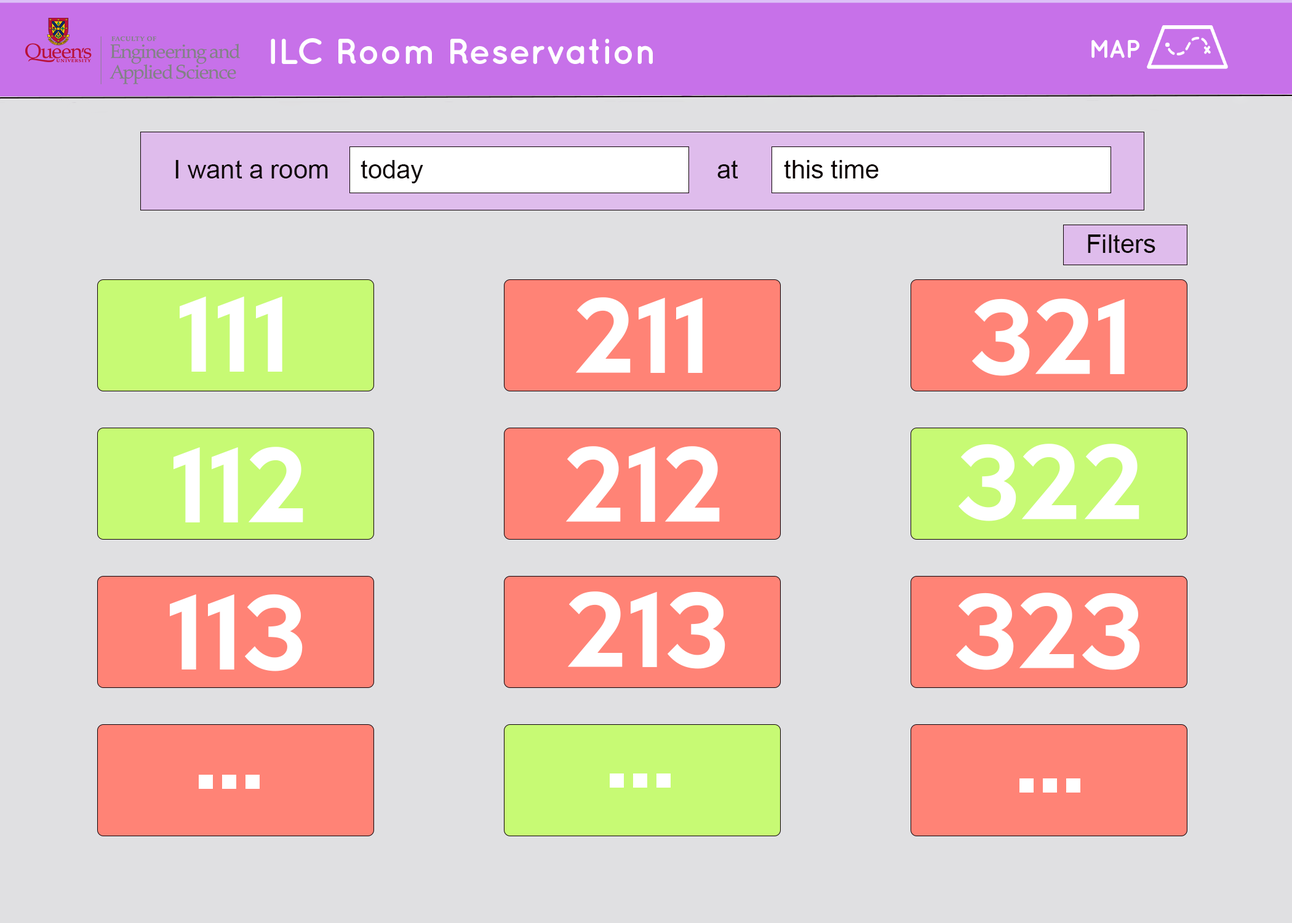
<style>
.page{position:relative;width:1292px;height:923px;background:#e0e0e2}
.page>*{position:absolute;margin:0}
.t1{font:35.9px "QuicksandBold-Regular";color:#ffffff}
.t2{font:25.6px "QuicksandBold-Regular";color:#ffffff}
.t3{font:25.6px "ArialMT";color:#100909}
.t4{font:25.6px "ArialMT";color:#0c0101}
.t5{font:92.3px "KeepCalm-Medium";color:#ffffff}
</style>
<div class="page">
<p class="t1" style="left:271px;top:38px;width:382px;height:26px">ILC Room Reservation</p>
<p class="t2" style="left:1091px;top:39px;width:48px;height:19px">MAP</p>
<p class="t3" style="left:175px;top:160px;width:153px;height:18px">I want a room</p>
<p class="t3" style="left:361px;top:160px;width:62px;height:23px">today</p>
<p class="t3" style="left:717px;top:160px;width:21px;height:18px">at</p>
<p class="t4" style="left:784px;top:160px;width:95px;height:18px">this time</p>
<p class="t3" style="left:1088px;top:234px;width:67px;height:19px">Filters</p>
<p class="t5" style="left:180px;top:296px;width:102px;height:76px">111</p>
<p class="t5" style="left:576px;top:297px;width:127px;height:76px">211</p>
<p class="t5" style="left:972px;top:298px;width:153px;height:78px">321</p>
<p class="t5" style="left:174px;top:447px;width:129px;height:75px">112</p>
<p class="t5" style="left:566px;top:446px;width:154px;height:76px">212</p>
<p class="t5" style="left:959px;top:444px;width:180px;height:77px">322</p>
<p class="t5" style="left:170px;top:594px;width:133px;height:77px">113</p>
<p class="t5" style="left:568px;top:591px;width:157px;height:78px">213</p>
<p class="t5" style="left:956px;top:592px;width:184px;height:78px">323</p>
<p class="t5" style="left:610px;top:773px;width:61px;height:15px">...</p>
<p class="t5" style="left:199px;top:775px;width:61px;height:14px">...</p>
<p class="t5" style="left:1019px;top:778px;width:61px;height:14px">...</p>
</div>
